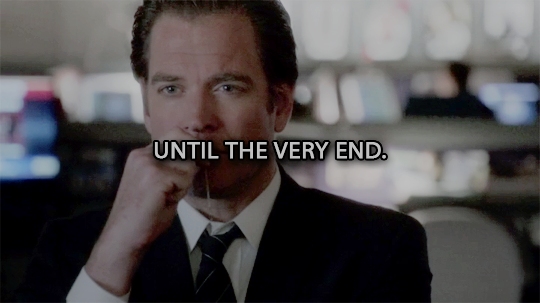
<style>
.page{position:relative;width:540px;height:303px}
.page>*{position:absolute;margin:0}
.t1{font:24px "MyriadWebPro";color:#c0c0c0;font-weight:bold}
</style>
<div class="page">
<p class="t1" style="left:154px;top:142px;width:232px;height:17px">UNTIL THE VERY END.</p>
</div>
